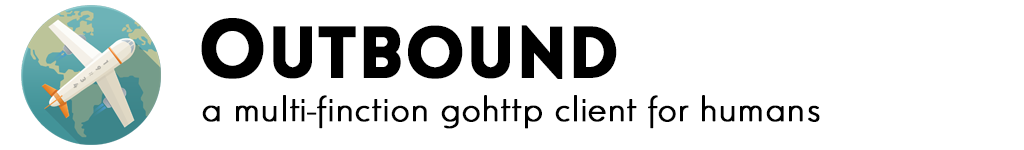
<style>
.page{position:relative;width:1024px;height:150px;background:#ffffff}
.page>*{position:absolute;margin:0}
.t1{font:71px "LoveloBlack";color:#000000;font-weight:bold}
.t2{font:81px "LoveloBlack";color:#000000;font-weight:bold}
.t3{font:39px "ElegantLux-Mager";color:#000000;font-weight:bold}
</style>
<div class="page">
<p class="t1" style="left:201px;top:18px;width:416px;height:61px"><span class="t2">O</span>utbound</p>
<p class="t3" style="left:202px;top:95px;width:618px;height:34px">a multi-finction gohttp client for humans</p>
</div>
